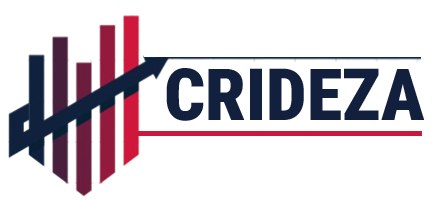
<style>
.page{position:relative;width:439px;height:200px;background:#ffffff}
.page>*{position:absolute;margin:0}
.t1{font:72px "Roboto-CondensedBlack";color:#12203d}
</style>
<div class="page">
<p class="t1" style="left:166px;top:68px;width:259px;height:53px">CRIDEZA</p>
</div>
